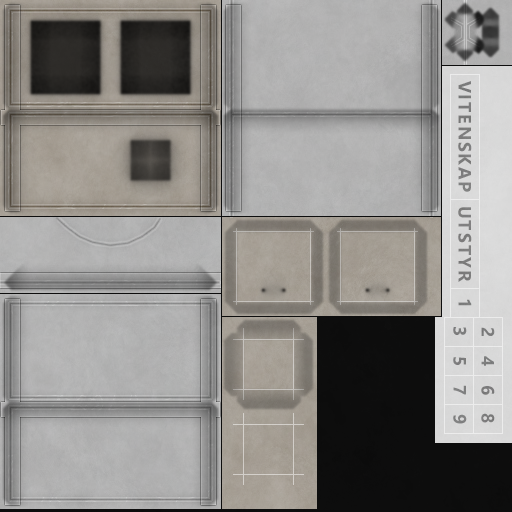
<style>
.page{position:relative;width:512px;height:512px}
.page>*{position:absolute;margin:0}
.t1{font:18px "SegoeUI-Bold";letter-spacing:0.1em;color:#808080}
</style>
<div class="page">
<p class="t1" style="left:458px;top:81px;width:14px;height:111px;rotate:90deg">VITENSKAP</p>
<p class="t1" style="left:458px;top:207px;width:14px;height:75px;rotate:90deg">UTSTYR</p>
<p class="t1" style="left:458px;top:299px;width:14px;height:7px;rotate:90deg">1</p>
<p class="t1" style="left:453px;top:327px;width:14px;height:8px;rotate:90deg">3</p>
<p class="t1" style="left:481px;top:327px;width:14px;height:9px;rotate:90deg">2</p>
<p class="t1" style="left:453px;top:357px;width:13px;height:8px;rotate:90deg">5</p>
<p class="t1" style="left:481px;top:356px;width:13px;height:10px;rotate:90deg">4</p>
<p class="t1" style="left:453px;top:385px;width:13px;height:10px;rotate:90deg">7</p>
<p class="t1" style="left:481px;top:386px;width:14px;height:9px;rotate:90deg">6</p>
<p class="t1" style="left:453px;top:414px;width:14px;height:10px;rotate:90deg">9</p>
<p class="t1" style="left:481px;top:413px;width:14px;height:10px;rotate:90deg">8</p>
</div>
